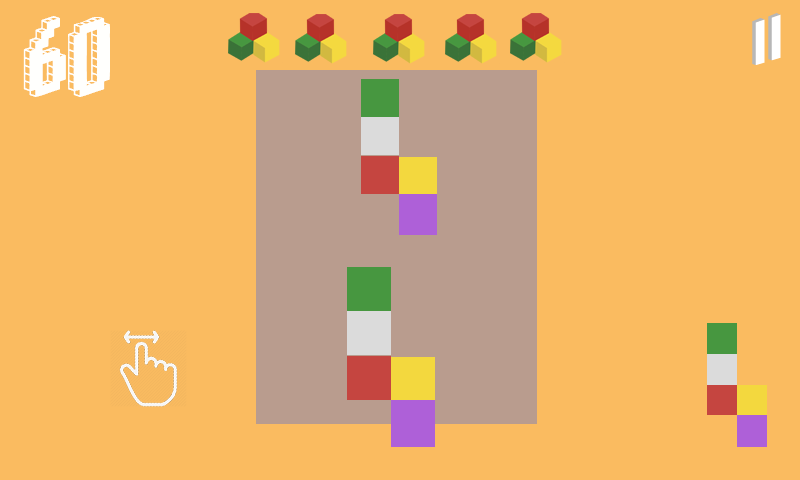
<style>
.page{position:relative;width:800px;height:480px;background:#fabb60}
.page>*{position:absolute;margin:0}
.t1{font:89px "Blox-(BRK";color:#fffffd}
</style>
<div class="page">
<p class="t1" style="left:23px;top:16px;width:87px;height:81px">60</p>
</div>
